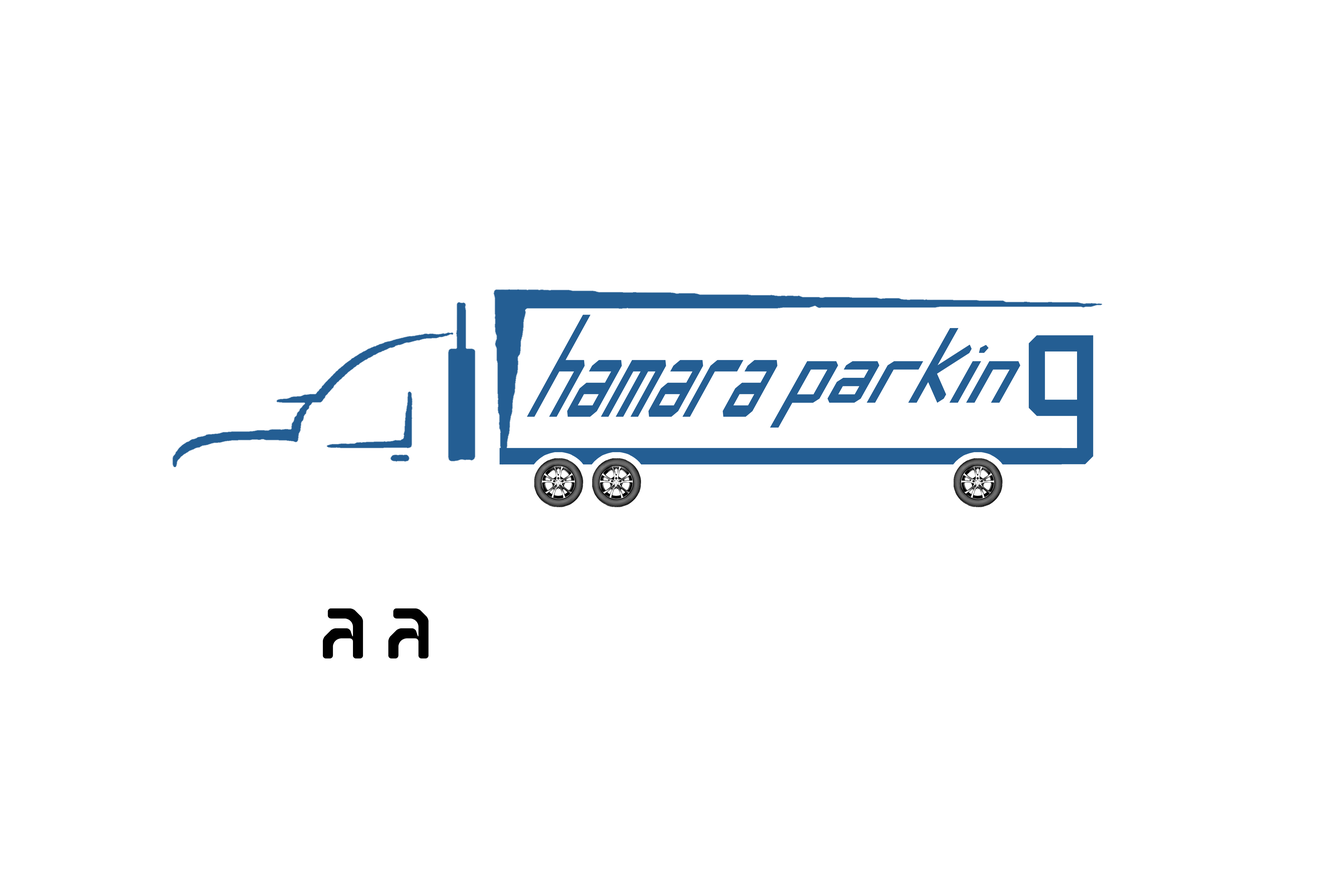
<style>
.page{position:relative;width:1337px;height:892px;background:#ffffff}
.page>*{position:absolute;margin:0}
.t1{font:206.8px "Banana-Square";color:#245e93;scale:0.57 1}
.t2{font:151.9px "Banana-Square";color:#245e93;scale:0.87 1}
.t3{font:257.6px "Banana-Square";color:#245e93}
.t4{font:92.9px "StreetMovementRounded-Bold";color:#000000}
</style>
<div class="page">
<p class="t1" style="left:527px;top:314px;width:251px;height:103px">hamara</p>
<p class="t2" style="left:770px;top:328px;width:251px;height:99px">parkin</p>
<p class="t3" style="left:1029px;top:335px;width:65px;height:129px">g</p>
<p class="t4" style="left:323px;top:608px;width:106px;height:50px">A a</p>
</div>
